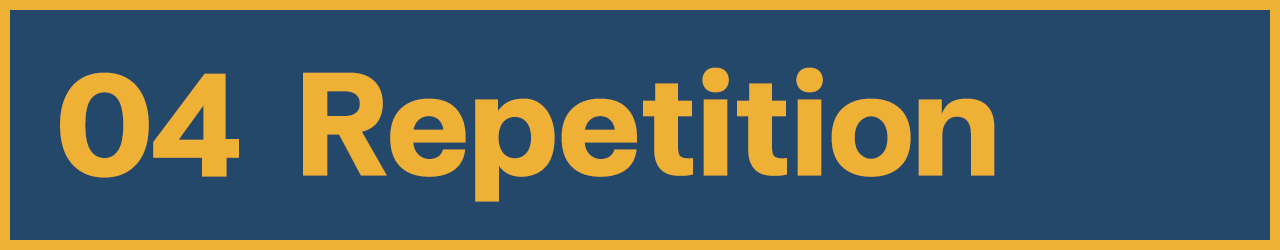
<style>
.page{position:relative;width:1280px;height:250px;background:#23486a}
.page>*{position:absolute;margin:0}
.t1{font:200px "FCMinimalBold";color:#efb036}
</style>
<div class="page">
<p class="t1" style="left:60px;top:72px;width:179px;height:106px">04</p>
<p class="t1" style="left:303px;top:67px;width:692px;height:135px">Repetition</p>
</div>
